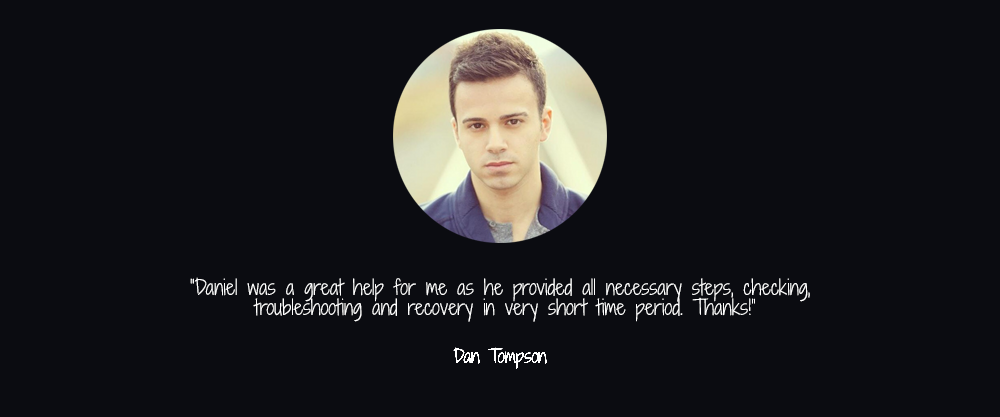
<style>
.page{position:relative;width:1000px;height:417px;background:#0b0c11}
.page>*{position:absolute;margin:0}
.t1{font:20px/20px "ShadowsIntoLight";color:#ffffff}
</style>
<div class="page">
<p class="t1" style="left:190px;top:277px;width:620px;height:45px;text-align:center">“Daniel was a great help for me as he provided all necessary steps, checking,<br> troubleshooting and recovery in very short time period. Thanks!”</p>
</div>
